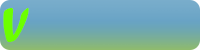
<style>
.page{position:relative;width:200px;height:50px}
.page>*{position:absolute;margin:0}
.t1{font:50px "ForteMT";color:#6cff00}
</style>
<div class="page">
<p class="t1" style="left:3px;top:8px;width:26px;height:34px">V</p>
</div>
